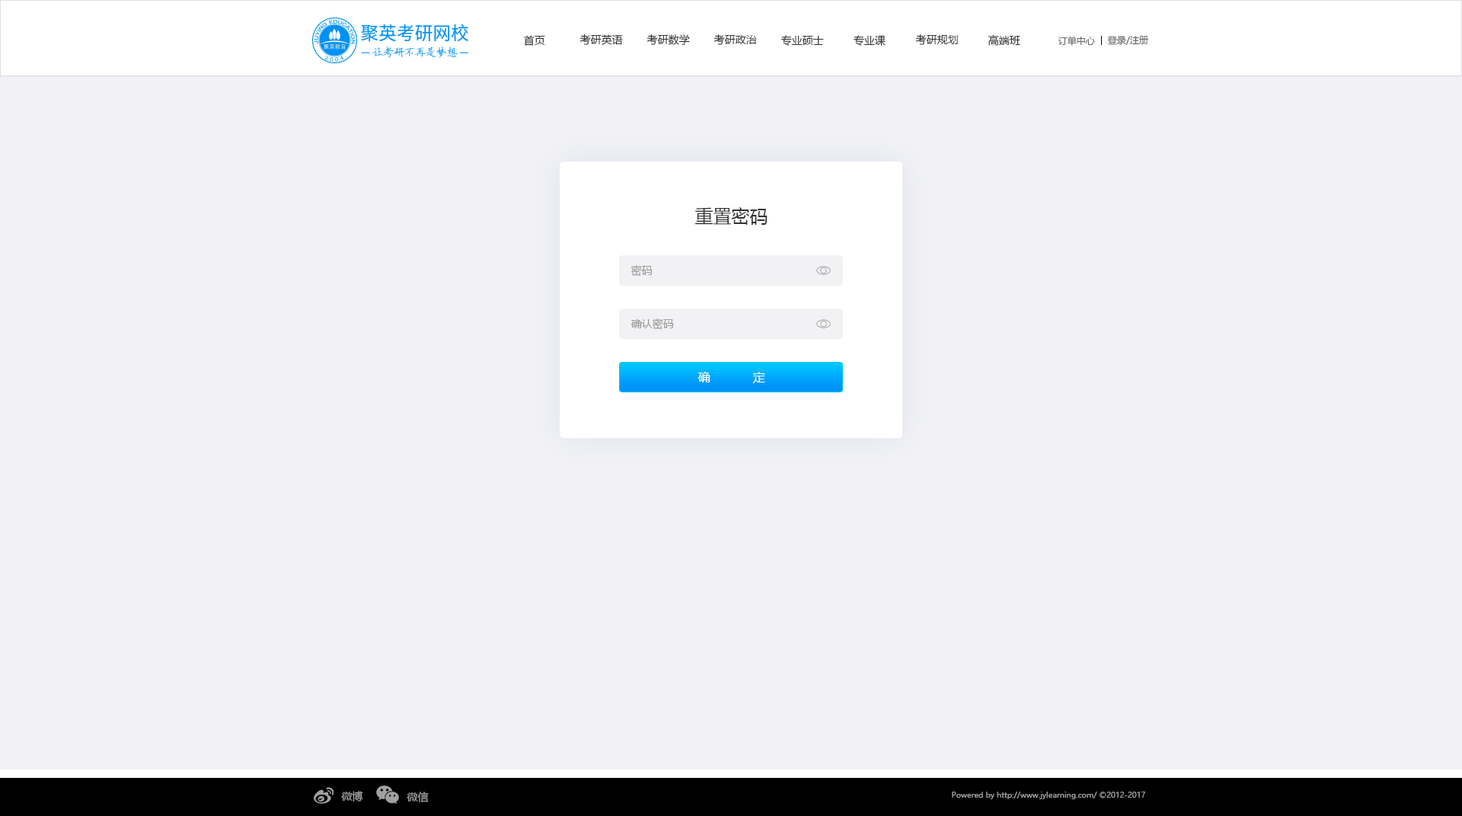
<style>
.page{position:relative;width:1462px;height:816px;background:#f2f2f5}
.page>*{position:absolute;margin:0}
.t1{font:10.7px "MicrosoftYaHei";color:#333333}
.t2{font:9.1px "MicrosoftYaHei";color:#666666}
.t3{font:18.3px "MicrosoftYaHei";color:#333333}
.t4{font:10.7px "MicrosoftYaHei";color:#999999}
.t5{font:12.2px "MicrosoftYaHei";color:#ffffff}
.t6{font:10.7px "MicrosoftYaHei";color:#a1a1a1}
.t7{font:7.6px "MicrosoftYaHei";color:#a1a1a1}
</style>
<div class="page">
<p class="t1" style="left:524px;top:35px;width:21px;height:11px">首页</p>
<p class="t1" style="left:580px;top:34px;width:43px;height:11px">考研英语</p>
<p class="t1" style="left:647px;top:34px;width:43px;height:11px">考研数学</p>
<p class="t1" style="left:714px;top:34px;width:43px;height:11px">考研政治</p>
<p class="t1" style="left:781px;top:35px;width:43px;height:11px">专业硕士</p>
<p class="t1" style="left:854px;top:35px;width:32px;height:11px">专业课</p>
<p class="t1" style="left:915px;top:34px;width:43px;height:11px">考研规划</p>
<p class="t1" style="left:988px;top:35px;width:32px;height:11px">高端班</p>
<p class="t2" style="left:1058px;top:36px;width:37px;height:10px">订单中心</p>
<p class="t2" style="left:1107px;top:36px;width:41px;height:9px">登录/注册</p>
<p class="t3" style="left:695px;top:207px;width:73px;height:18px">重置密码</p>
<p class="t4" style="left:631px;top:265px;width:22px;height:11px">密码</p>
<p class="t4" style="left:631px;top:318px;width:43px;height:11px">确认密码</p>
<p class="t5" style="left:698px;top:372px;width:67px;height:11px">确  定</p>
<p class="t6" style="left:341px;top:790px;width:22px;height:11px">微博</p>
<p class="t6" style="left:407px;top:791px;width:22px;height:11px">微信</p>
<p class="t7" style="left:952px;top:791px;width:193px;height:8px">Powered by http://www.jylearning.com/ ©2012-2017</p>
</div>
